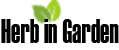
<style>
.page{position:relative;width:119px;height:50px;background:#ffffff}
.page>*{position:absolute;margin:0}
.t1{font:33.9px "Haettenschweiler";color:#000000;scale:0.78 1}
</style>
<div class="page">
<p class="t1" style="left:1px;top:19px;width:118px;height:24px">Herb in Garden</p>
</div>
